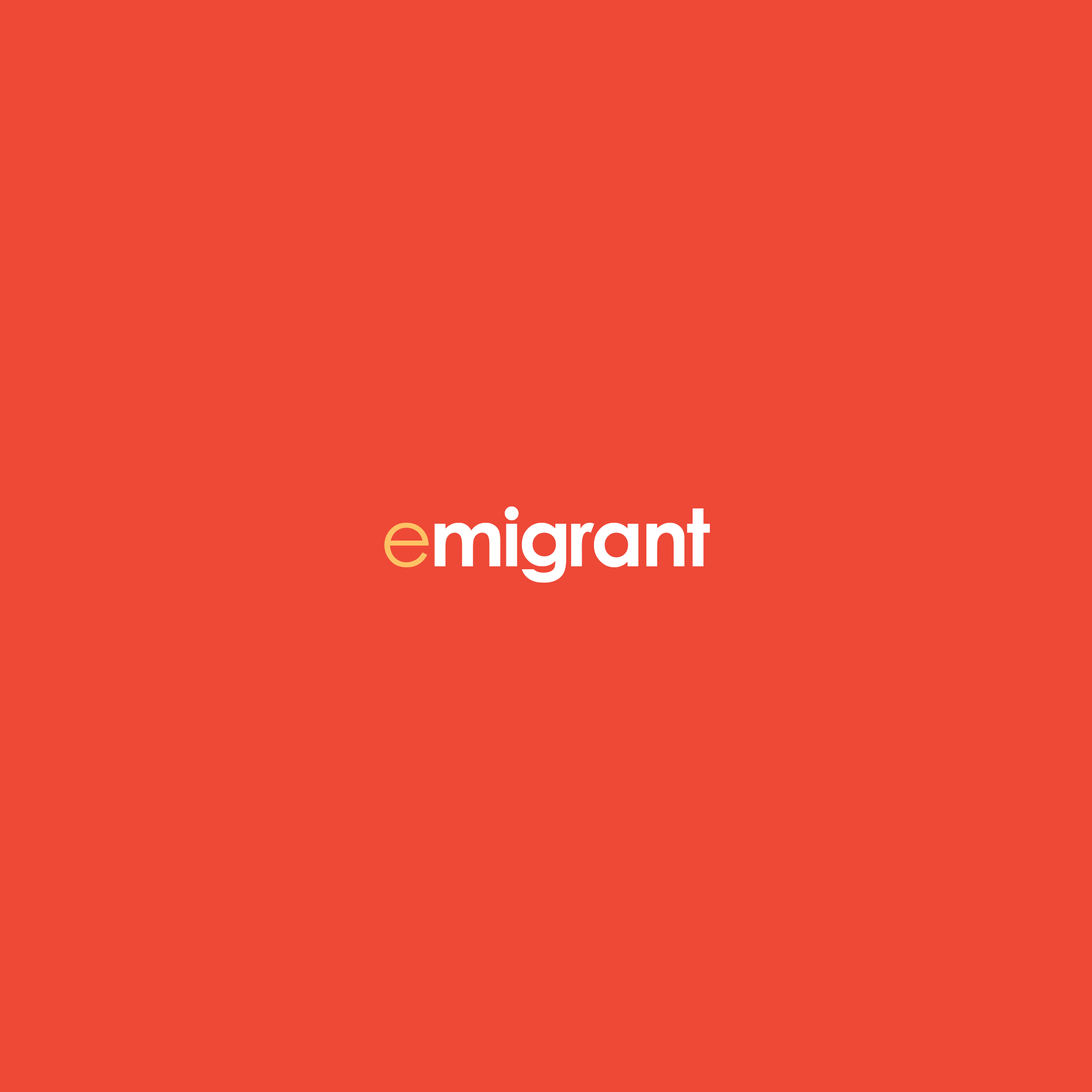
<style>
.page{position:relative;width:1092px;height:1092px;background:#ee4837}
.page>*{position:absolute;margin:0}
.t1{font:79.7px "CenturyGothic-Bold";letter-spacing:-0.04em;color:#ffffff}
.t2{font:79.7px "CenturyGothic";letter-spacing:-0.04em;color:#fec264}
</style>
<div class="page">
<p class="t1" style="left:384px;top:506px;width:326px;height:77px"><span class="t2">e</span>migrant</p>
</div>
